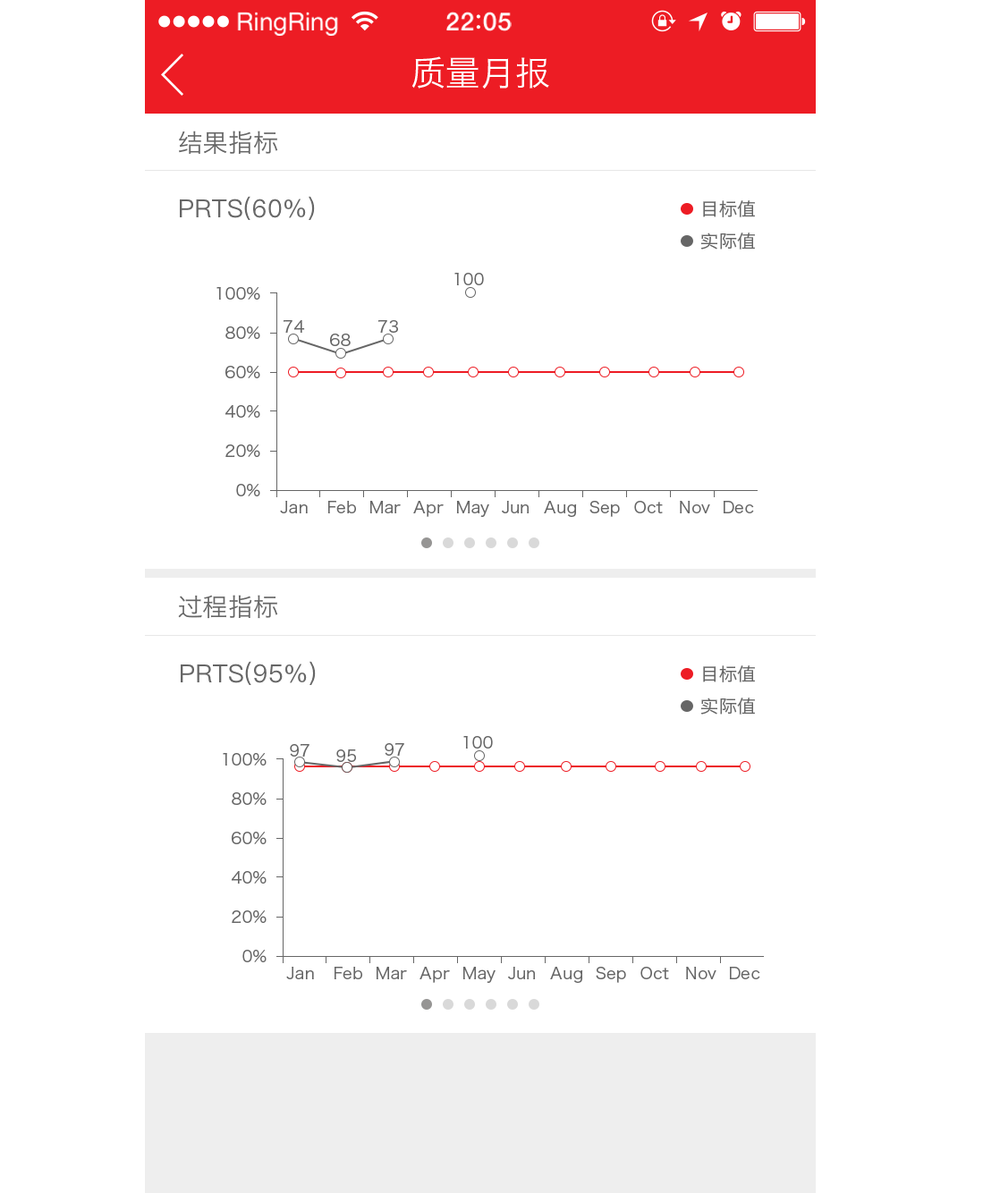
<style>
.page{position:relative;width:1000px;height:1193px;background:#ffffff}
.page>*{position:absolute;margin:0}
.t1{font:25.1px "HelveticaNeue";color:#ffffff}
.t2{font:25.1px "HelveticaNeue-Medium";letter-spacing:0.03em;color:#ffffff}
.t3{font:34.6px "HiraginoSansGB-W3";letter-spacing:0.01em;color:#ffffff}
.t4{font:25px "HiraginoSansGB-W3";letter-spacing:0.01em;color:#666666}
.t5{font:25px "PingFangSC-Regular";letter-spacing:0.01em;color:#666666}
.t6{font:17.7px "HiraginoSansGB-W3";letter-spacing:0.01em;color:#666666}
.t7{font:16.1px "HiraginoSansGB-W3";letter-spacing:0.01em;color:#666666}
</style>
<div class="page">
<p class="t1" style="left:237px;top:12px;width:101px;height:24px">RingRing</p>
<p class="t2" style="left:446px;top:12px;width:65px;height:19px">22 05</p>
<p class="t3" style="left:411px;top:56px;width:138px;height:33px">质量月报</p>
<p class="t4" style="left:179px;top:131px;width:99px;height:24px">结果指标</p>
<p class="t5" style="left:180px;top:196px;width:135px;height:24px">PRTS(60%)</p>
<p class="t6" style="left:703px;top:200px;width:52px;height:17px">目标值</p>
<p class="t6" style="left:700px;top:232px;width:55px;height:17px">实际值</p>
<p class="t7" style="left:454px;top:273px;width:30px;height:12px">100</p>
<p class="t7" style="left:216px;top:287px;width:44px;height:13px">100%</p>
<p class="t7" style="left:225px;top:326px;width:35px;height:13px">80%</p>
<p class="t7" style="left:283px;top:320px;width:22px;height:13px">74</p>
<p class="t7" style="left:378px;top:320px;width:20px;height:13px">73</p>
<p class="t7" style="left:330px;top:334px;width:21px;height:12px">68</p>
<p class="t7" style="left:225px;top:366px;width:35px;height:12px">60%</p>
<p class="t7" style="left:225px;top:405px;width:35px;height:13px">40%</p>
<p class="t7" style="left:225px;top:444px;width:35px;height:13px">20%</p>
<p class="t7" style="left:236px;top:484px;width:24px;height:12px">0%</p>
<p class="t7" style="left:280px;top:501px;width:28px;height:12px">Jan</p>
<p class="t7" style="left:327px;top:501px;width:29px;height:12px">Feb</p>
<p class="t7" style="left:369px;top:501px;width:32px;height:12px">Mar</p>
<p class="t7" style="left:413px;top:501px;width:31px;height:16px">Apr</p>
<p class="t7" style="left:456px;top:501px;width:33px;height:16px">May</p>
<p class="t7" style="left:502px;top:501px;width:27px;height:12px">Jun</p>
<p class="t7" style="left:544px;top:501px;width:33px;height:16px">Aug</p>
<p class="t7" style="left:589px;top:501px;width:31px;height:16px">Sep</p>
<p class="t7" style="left:634px;top:501px;width:29px;height:12px">Oct</p>
<p class="t7" style="left:680px;top:501px;width:30px;height:12px">Nov</p>
<p class="t7" style="left:722px;top:501px;width:32px;height:12px">Dec</p>
<p class="t4" style="left:178px;top:595px;width:100px;height:24px">过程指标</p>
<p class="t5" style="left:181px;top:661px;width:135px;height:24px">PRTS(95%)</p>
<p class="t6" style="left:703px;top:665px;width:52px;height:17px">目标值</p>
<p class="t6" style="left:700px;top:697px;width:55px;height:17px">实际值</p>
<p class="t7" style="left:463px;top:736px;width:30px;height:12px">100</p>
<p class="t7" style="left:290px;top:744px;width:19px;height:12px">97</p>
<p class="t7" style="left:336px;top:749px;width:20px;height:13px">95</p>
<p class="t7" style="left:384px;top:743px;width:20px;height:13px">97</p>
<p class="t7" style="left:223px;top:753px;width:43px;height:12px">100%</p>
<p class="t7" style="left:232px;top:792px;width:34px;height:13px">80%</p>
<p class="t7" style="left:232px;top:832px;width:34px;height:12px">60%</p>
<p class="t7" style="left:232px;top:871px;width:34px;height:12px">40%</p>
<p class="t7" style="left:232px;top:910px;width:34px;height:13px">20%</p>
<p class="t7" style="left:242px;top:950px;width:24px;height:12px">0%</p>
<p class="t7" style="left:286px;top:967px;width:28px;height:12px">Jan</p>
<p class="t7" style="left:334px;top:967px;width:28px;height:12px">Feb</p>
<p class="t7" style="left:376px;top:967px;width:31px;height:12px">Mar</p>
<p class="t7" style="left:419px;top:967px;width:31px;height:16px">Apr</p>
<p class="t7" style="left:462px;top:967px;width:33px;height:16px">May</p>
<p class="t7" style="left:508px;top:967px;width:28px;height:12px">Jun</p>
<p class="t7" style="left:550px;top:967px;width:33px;height:16px">Aug</p>
<p class="t7" style="left:596px;top:967px;width:30px;height:16px">Sep</p>
<p class="t7" style="left:640px;top:967px;width:29px;height:12px">Oct</p>
<p class="t7" style="left:686px;top:967px;width:30px;height:12px">Nov</p>
<p class="t7" style="left:729px;top:967px;width:31px;height:12px">Dec</p>
</div>
